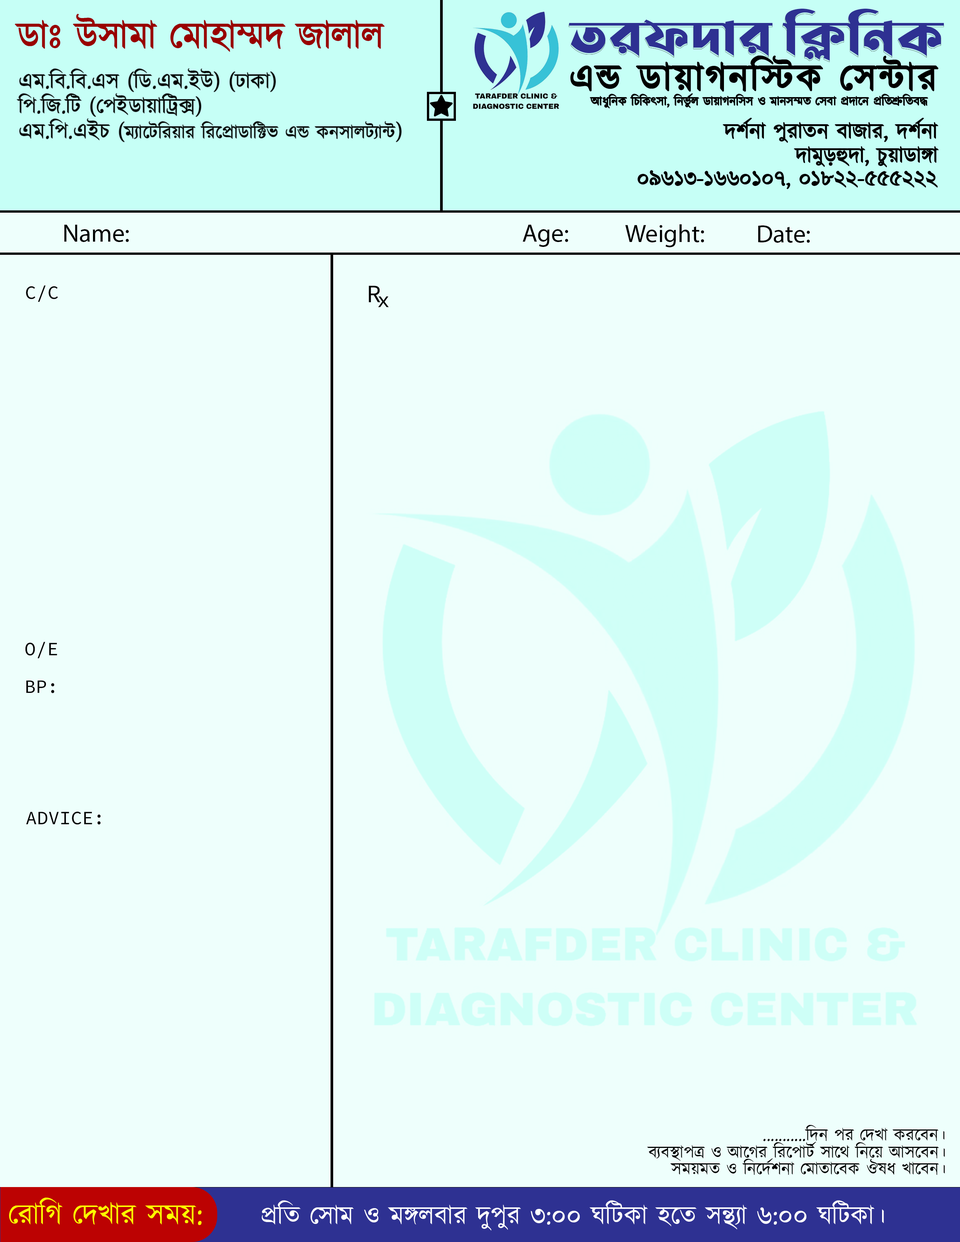
<style>
.page{position:relative;width:960px;height:1242px;background:#eefffc}
.page>*{position:absolute;margin:0}
.t1{font:37.6px "Kalpurush";color:#9a0000}
.t2{font:51px "LiSirajeeSheikhPlainUnicode";color:#2e3192}
.t3{font:37.6px "Kalpurush";letter-spacing:0.06em;color:#000000}
.t4{font:22px/25.1px "Kalpurush";color:#000000}
.t5{font:18.8px/25.1px "Kalpurush";color:#000000}
.t6{font:12.5px "Kalpurush";color:#000000}
.t7{font:22px "Kalpurush";color:#000000}
.t8{font:25.1px "MyriadPro-Regular";color:#000000}
.t9{font:18.8px "SourceCodePro-Regular";color:#000000}
.t10{font:25.1px "SourceCodePro-Regular";color:#000000}
.t11{font:22px "SourceCodePro-Regular";color:#000000}
.t12{font:17.3px "Kalpurush";color:#000000}
.t13{font:29.9px "Kalpurush";color:#fcff00}
.t14{font:26.5px "Kalpurush";color:#ffffff}
</style>
<div class="page">
<p class="t1" style="left:15px;top:14px;width:369px;height:38px">ডাঃ উসামা মোহাম্মদ জালাল</p>
<p class="t2" style="left:569px;top:9px;width:375px;height:52px">তরফদার ক্লিনিক</p>
<p class="t3" style="left:571px;top:56px;width:367px;height:35px">এন্ড ডায়াগনস্টিক সেন্টার</p>
<p class="t4" style="left:17px;top:69px;width:384px;height:73px">এম.বি.বি.এস (ডি.এম.ইউ) (ঢাকা)<br>পি.জি.টি (পেইডায়াট্রিক্স)<br>এম.পি.এইচ (<span class="t5">ম্যাটেরিয়ার রিপ্রোডাক্টিভ এন্ড কনসালট্যান্ট</span>)</p>
<p class="t6" style="left:590px;top:94px;width:338px;height:14px">আধুনিক চিকিৎসা, নির্ভুল ডায়াগনসিস ও মানসম্মত সেবা প্রদানে প্রতিশ্রুতিবদ্ধ</p>
<p class="t7" style="left:723px;top:118px;width:215px;height:25px">দর্শনা পুরাতন বাজার, দর্শনা</p>
<p class="t7" style="left:794px;top:146px;width:144px;height:21px">দামুড়হুদা, চুয়াডাঙ্গা</p>
<p class="t7" style="left:638px;top:171px;width:299px;height:18px">০৯৬১৩-১৬৬০১০৭, ০১৮২২-৫৫৫২২২</p>
<p class="t8" style="left:64px;top:225px;width:65px;height:17px">Name:</p>
<p class="t8" style="left:522px;top:225px;width:46px;height:22px">Age:</p>
<p class="t8" style="left:625px;top:224px;width:79px;height:23px">Weight:</p>
<p class="t8" style="left:758px;top:225px;width:52px;height:18px">Date:</p>
<p class="t9" style="left:26px;top:285px;width:32px;height:17px">C/C</p>
<p class="t10" style="left:369px;top:286px;width:11px;height:16px">R</p>
<p class="t11" style="left:378px;top:296px;width:11px;height:12px">x</p>
<p class="t9" style="left:25px;top:642px;width:32px;height:16px">O/E</p>
<p class="t9" style="left:26px;top:681px;width:28px;height:12px">BP:</p>
<p class="t9" style="left:26px;top:812px;width:75px;height:13px">ADVICE:</p>
<p class="t12" style="left:763px;top:1125px;width:181px;height:16px">...........দিন পর দেখা করবেন।</p>
<p class="t12" style="left:647px;top:1142px;width:298px;height:19px">ব্যবস্থাপত্র ও আগের রিপোর্ট সাথে নিয়ে আসবেন।</p>
<p class="t12" style="left:670px;top:1159px;width:275px;height:16px">সময়মত ও নির্দেশনা মোতাবেক ঔষধ খাবেন।</p>
<p class="t13" style="left:9px;top:1198px;width:193px;height:27px">রোগি দেখার সময়:</p>
<p class="t14" style="left:262px;top:1200px;width:622px;height:31px">প্রতি সোম ও মঙ্গলবার দুপুর ৩:০০ ঘটিকা হতে সন্থ্যা ৬:০০ ঘটিকা।</p>
</div>
